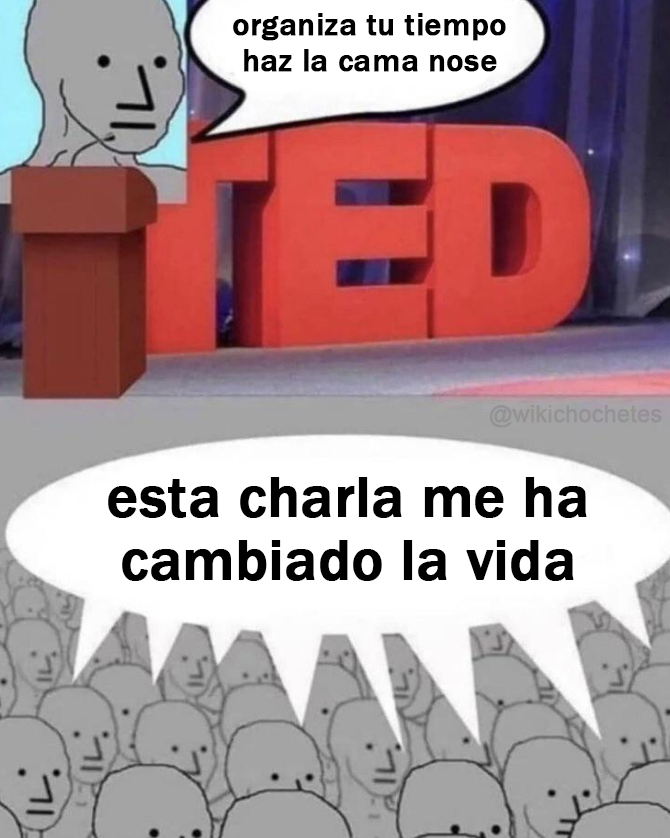
<style>
.page{position:relative;width:670px;height:838px}
.page>*{position:absolute;margin:0}
.t1{font:32.2px "FranklinGothic-Medium";color:#000000;font-weight:bold}
.t2{font:22.8px "ArialMT";color:#939394;font-weight:bold}
.t3{font:58.9px "FranklinGothic-Medium";color:#000000;font-weight:bold}
</style>
<div class="page">
<p class="t1" style="left:233px;top:13px;width:273px;height:59px;text-align:center">organiza tu tiempo<br>haz la cama nose</p>
<p class="t2" style="left:490px;top:405px;width:172px;height:23px">@wikichochetes</p>
<p class="t3" style="left:108px;top:477px;width:479px;height:104px;text-align:center">esta charla me ha<br>cambiado la vida</p>
</div>
